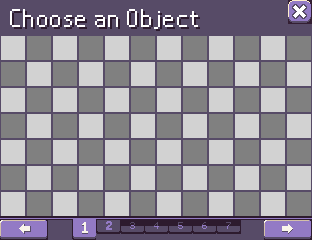
<style>
.page{position:relative;width:312px;height:240px;background:#d2d2d2}
.page>*{position:absolute;margin:0}
.t1{font:32px "Nintendo-DS-BIOS";letter-spacing:0.04em;color:#ffffff}
.t2{font:32px "Nintendo-DS-BIOS";letter-spacing:0.04em;color:#2d1b2e}
</style>
<div class="page">
<p class="t1" style="left:10px;top:9px;width:188px;height:20px">Choose an Object</p>
<p class="t2" style="left:12px;top:11px;width:188px;height:20px">Choose an Object</p>
</div>
